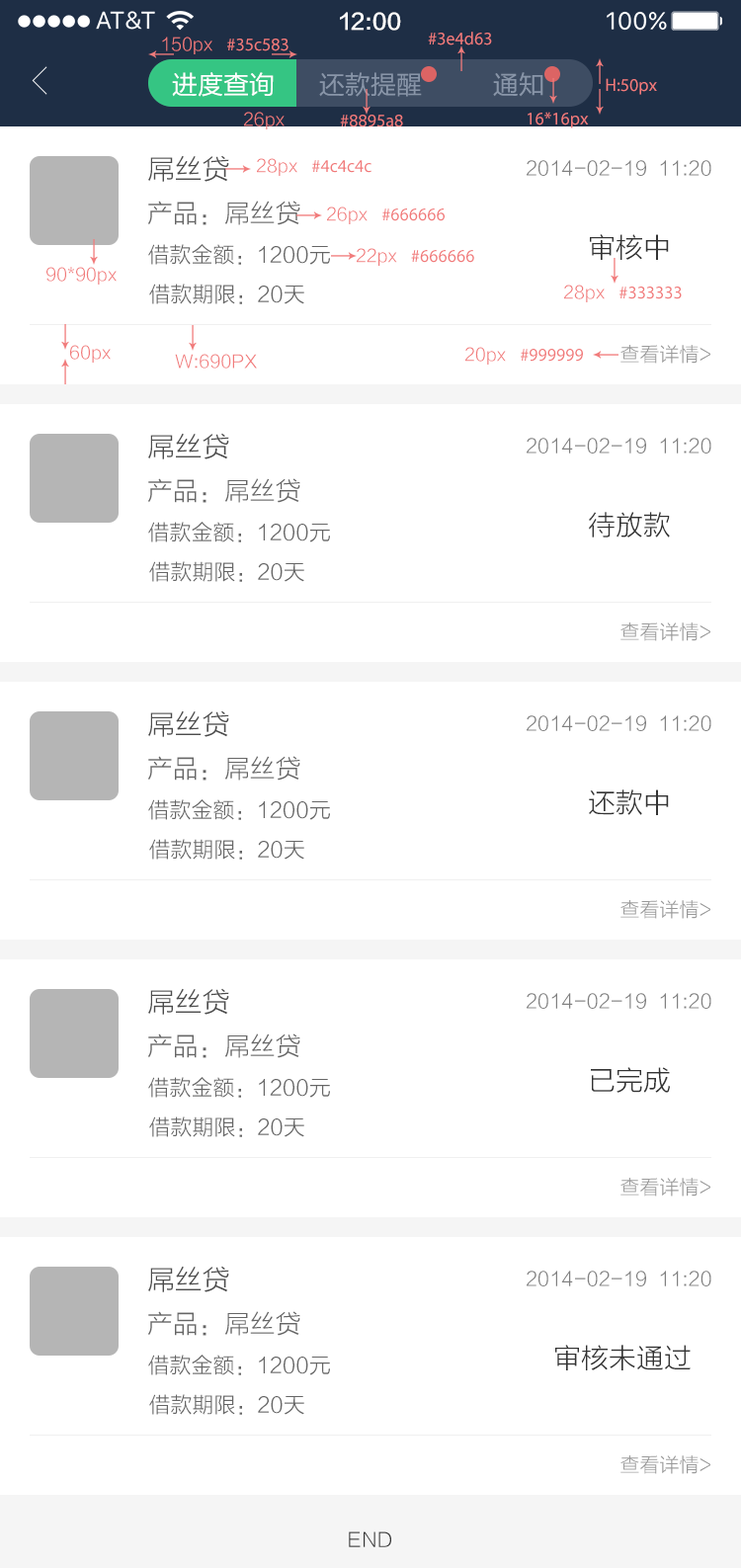
<style>
.page{position:relative;width:741px;height:1568px;background:#ffffff}
.page>*{position:absolute;margin:0}
.t1{font:21.7px "FZLTZHK--GBK1-0";color:#ffffff}
.t2{font:17.8px "MyriadPro-Regular";color:#f17b7b}
.t3{font:17.8px "FZLTXHK";color:#f17b7b}
.t4{font:25.7px "FZLTHJW--GB1-0";color:#ffffff}
.t5{font:25.7px "FZLTHJW--GB1-0";color:#8895a8}
.t6{font:27.7px "FZLTXHK";color:#4d4d4d}
.t7{font:19.8px "FZLTXHK";color:#808080}
.t8{font:25.7px "FZLTXHK";color:#666666}
.t9{font:21.7px "FZLTXHK";color:#666666}
.t10{font:27.7px "FZLTXHK";color:#333333}
.t11{font:19.8px "FZLTXHK";color:#999999}
.t12{font:19.8px "FZLTXHK";color:#333333}
</style>
<div class="page">
<p class="t1" style="left:340px;top:12px;width:61px;height:19px">12:00</p>
<p class="t2" style="left:162px;top:37px;width:127px;height:17px"><span class="t3">150px  </span> #35c583</p>
<p class="t2" style="left:428px;top:32px;width:64px;height:13px">#3e4d63</p>
<p class="t4" style="left:172px;top:72px;width:102px;height:25px">进度查询</p>
<p class="t5" style="left:319px;top:72px;width:103px;height:25px">还款提醒</p>
<p class="t5" style="left:493px;top:72px;width:50px;height:25px">通知</p>
<p class="t2" style="left:606px;top:78px;width:51px;height:17px">H:50px</p>
<p class="t3" style="left:244px;top:112px;width:41px;height:17px">26px</p>
<p class="t2" style="left:528px;top:112px;width:61px;height:16px">16*16px</p>
<p class="t2" style="left:340px;top:115px;width:63px;height:12px">#8895a8</p>
<p class="t6" style="left:148px;top:155px;width:81px;height:27px">屌丝贷</p>
<p class="t2" style="left:257px;top:158px;width:114px;height:18px"><span class="t3">28px  </span> #4c4c4c</p>
<p class="t7" style="left:527px;top:160px;width:184px;height:16px">2014-02-19  11:20</p>
<p class="t8" style="left:148px;top:201px;width:152px;height:24px">产品：屌丝贷</p>
<p class="t2" style="left:327px;top:206px;width:118px;height:18px"><span class="t3">26px  </span> #666666</p>
<p class="t9" style="left:148px;top:244px;width:182px;height:21px">借款金额：1200元</p>
<p class="t10" style="left:590px;top:234px;width:79px;height:26px">审核中</p>
<p class="t2" style="left:357px;top:248px;width:117px;height:18px"><span class="t3">22px  </span> #666666</p>
<p class="t3" style="left:46px;top:267px;width:71px;height:18px">90*90px</p>
<p class="t9" style="left:149px;top:284px;width:155px;height:20px">借款期限：20天</p>
<p class="t2" style="left:564px;top:285px;width:118px;height:17px"><span class="t3">28px  </span> #333333</p>
<p class="t3" style="left:70px;top:345px;width:41px;height:18px">60px</p>
<p class="t3" style="left:175px;top:354px;width:82px;height:15px">W:690PX</p>
<p class="t2" style="left:465px;top:347px;width:118px;height:18px"><span class="t3">20px  </span> #999999</p>
<p class="t11" style="left:620px;top:345px;width:90px;height:19px">查看详情&gt;</p>
<p class="t6" style="left:148px;top:433px;width:81px;height:26px">屌丝贷</p>
<p class="t7" style="left:527px;top:438px;width:184px;height:16px">2014-02-19  11:20</p>
<p class="t8" style="left:148px;top:478px;width:152px;height:25px">产品：屌丝贷</p>
<p class="t9" style="left:148px;top:522px;width:182px;height:20px">借款金额：1200元</p>
<p class="t10" style="left:589px;top:512px;width:81px;height:25px">待放款</p>
<p class="t9" style="left:149px;top:561px;width:155px;height:21px">借款期限：20天</p>
<p class="t11" style="left:620px;top:622px;width:90px;height:19px">查看详情&gt;</p>
<p class="t6" style="left:148px;top:710px;width:81px;height:27px">屌丝贷</p>
<p class="t7" style="left:527px;top:715px;width:184px;height:16px">2014-02-19  11:20</p>
<p class="t8" style="left:148px;top:756px;width:152px;height:25px">产品：屌丝贷</p>
<p class="t10" style="left:589px;top:789px;width:80px;height:26px">还款中</p>
<p class="t9" style="left:148px;top:799px;width:182px;height:21px">借款金额：1200元</p>
<p class="t9" style="left:149px;top:839px;width:155px;height:21px">借款期限：20天</p>
<p class="t11" style="left:620px;top:900px;width:90px;height:19px">查看详情&gt;</p>
<p class="t6" style="left:148px;top:988px;width:81px;height:27px">屌丝贷</p>
<p class="t7" style="left:527px;top:993px;width:184px;height:16px">2014-02-19  11:20</p>
<p class="t8" style="left:148px;top:1033px;width:152px;height:25px">产品：屌丝贷</p>
<p class="t10" style="left:591px;top:1067px;width:79px;height:26px">已完成</p>
<p class="t9" style="left:148px;top:1077px;width:182px;height:21px">借款金额：1200元</p>
<p class="t9" style="left:149px;top:1116px;width:155px;height:21px">借款期限：20天</p>
<p class="t11" style="left:620px;top:1178px;width:90px;height:19px">查看详情&gt;</p>
<p class="t6" style="left:148px;top:1266px;width:81px;height:26px">屌丝贷</p>
<p class="t7" style="left:527px;top:1271px;width:184px;height:15px">2014-02-19  11:20</p>
<p class="t8" style="left:148px;top:1311px;width:152px;height:25px">产品：屌丝贷</p>
<p class="t10" style="left:555px;top:1345px;width:136px;height:25px">审核未通过</p>
<p class="t9" style="left:148px;top:1355px;width:182px;height:20px">借款金额：1200元</p>
<p class="t9" style="left:149px;top:1394px;width:155px;height:21px">借款期限：20天</p>
<p class="t11" style="left:620px;top:1455px;width:90px;height:19px">查看详情&gt;</p>
<p class="t12" style="left:349px;top:1531px;width:42px;height:16px">END</p>
</div>
